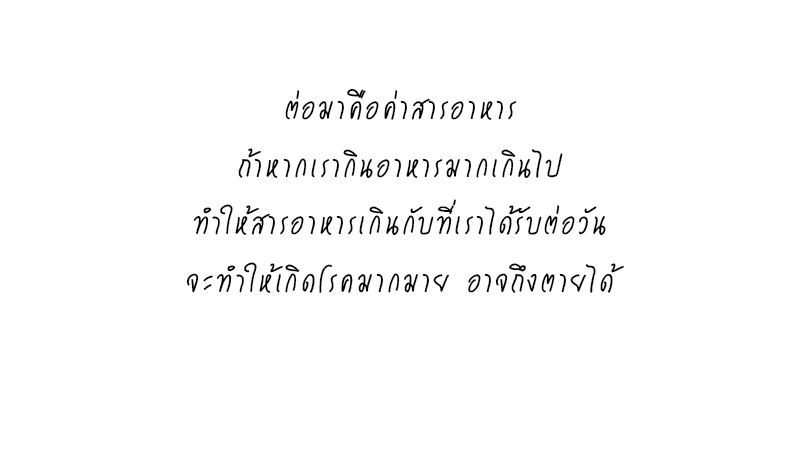
<style>
.page{position:relative;width:799px;height:453px;background:#ffffff}
.page>*{position:absolute;margin:0}
.t1{font:48px "2006iannnnnBKK";color:#000000}
</style>
<div class="page">
<p class="t1" style="left:186px;top:88px;width:438px;height:205px;text-align:center">ต่อมาคือค่าสารอาหาร<br>ถ้าหากเรากินอาหารมากเกินไป<br>ทำให้สารอาหารเกินกับที่เราได้รับต่อวัน<br>จะทำให้เกิดโรคมากมาย อาจถึงตายได้</p>
</div>
